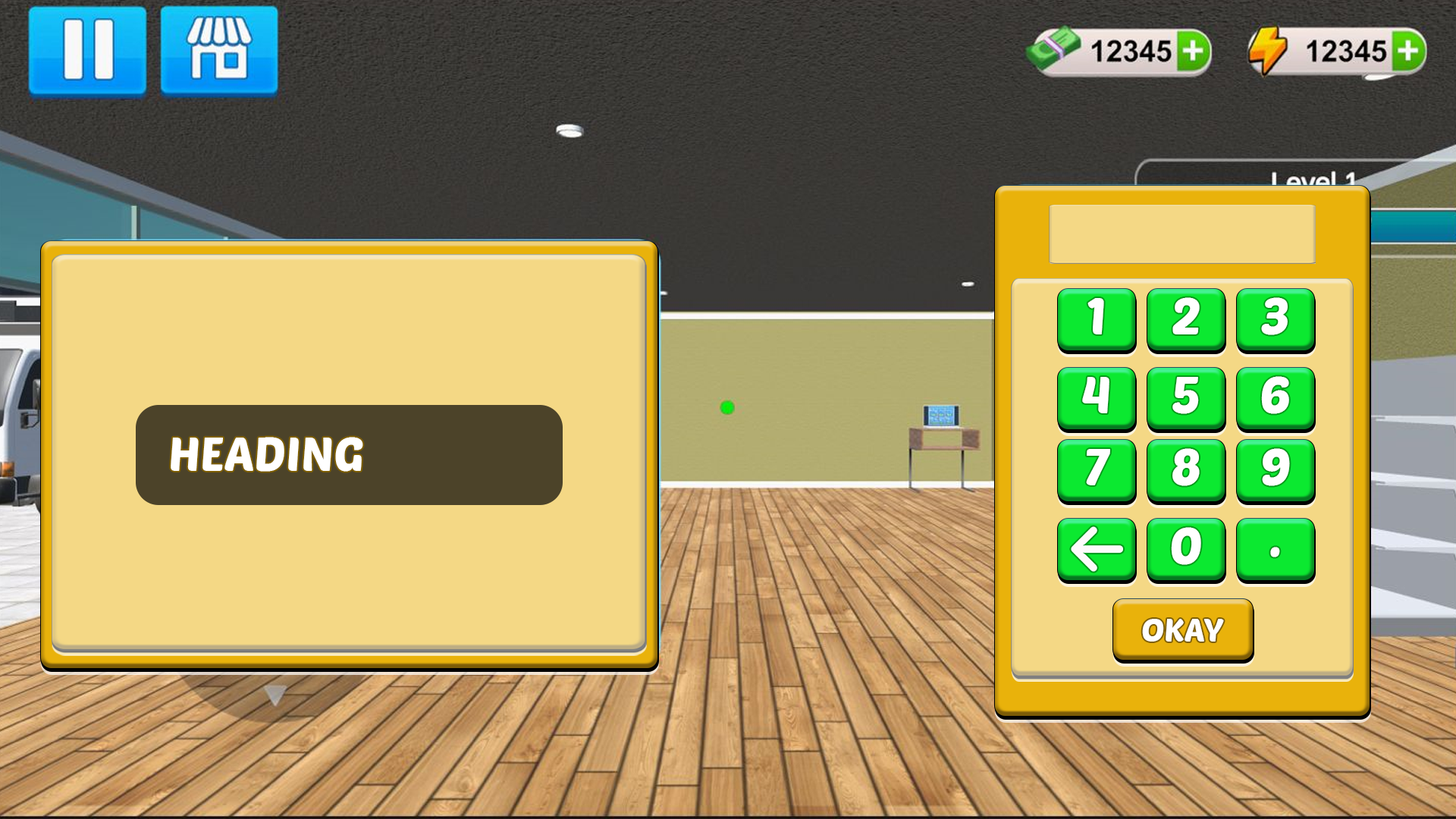
<style>
.page{position:relative;width:1456px;height:819px}
.page>*{position:absolute;margin:0}
.t1{font:50.8px "PoetsenOne-Regular";color:#ffffff}
.t2{font:47.9px "PoetsenOne-Regular";color:#ffffff}
.t3{font:32.5px "PoetsenOne-Regular";color:#ffffff}
</style>
<div class="page">
<p class="t1" style="left:1087px;top:298px;width:17px;height:36px">1</p>
<p class="t1" style="left:1172px;top:297px;width:28px;height:37px">2</p>
<p class="t1" style="left:1261px;top:297px;width:27px;height:38px">3</p>
<p class="t1" style="left:1082px;top:377px;width:27px;height:36px">4</p>
<p class="t1" style="left:1172px;top:377px;width:27px;height:37px">5</p>
<p class="t1" style="left:1261px;top:376px;width:28px;height:38px">6</p>
<p class="t2" style="left:171px;top:437px;width:192px;height:35px">HEADING</p>
<p class="t1" style="left:1086px;top:449px;width:24px;height:36px">7</p>
<p class="t1" style="left:1172px;top:448px;width:28px;height:38px">8</p>
<p class="t1" style="left:1262px;top:448px;width:28px;height:38px">9</p>
<p class="t1" style="left:1171px;top:527px;width:30px;height:38px">0</p>
<p class="t1" style="left:1270px;top:547px;width:10px;height:10px">.</p>
<p class="t3" style="left:1142px;top:619px;width:82px;height:23px">OKAY</p>
</div>
